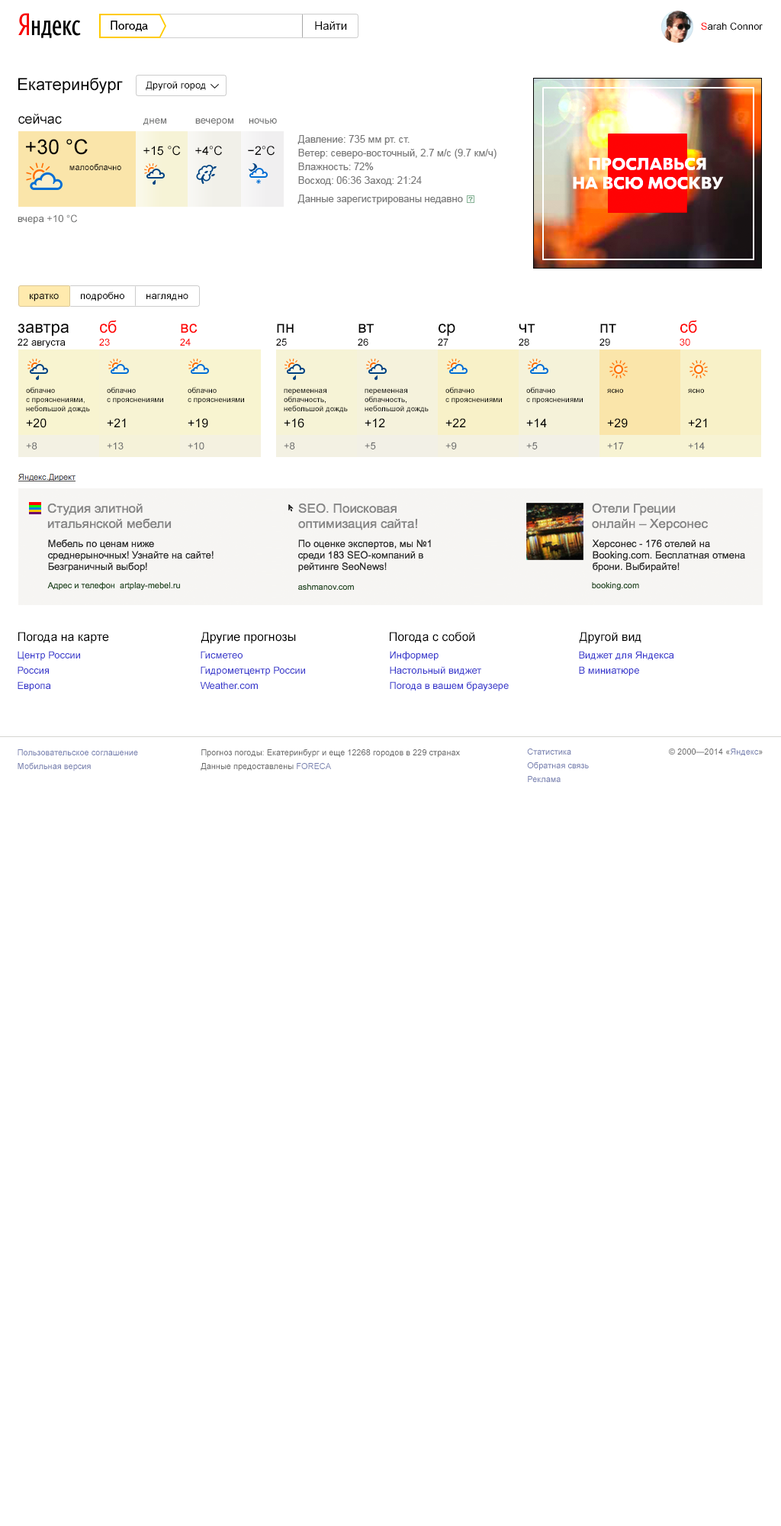
<style>
.page{position:relative;width:781px;height:1526px;background:#ffffff}
.page>*{position:absolute;margin:0}
.t1{font:12.2px "TextbookNew-Regular";color:#000000}
.t2{font:11.4px "ArialMT";color:#000000}
.t3{font:9.9px "ArialMT";color:#000000}
.t4{font:9.9px "ArialMT";color:#ff0000}
.t5{font:16.8px "ArialMT";color:#000000}
.t6{font:13.7px "ArialMT";color:#000000}
.t7{font:9.9px "ArialMT";color:#6d6e6e}
.t8{font:9.9px/13.7px "ArialMT";color:#797979}
.t9{font:9.9px/18.3px "ArialMT";color:#797979}
.t10{font:20.6px "ArialMT";color:#000000}
.t11{font:12.2px "ArialMT";color:#000000}
.t12{font:8.4px "ArialMT";color:#000000}
.t13{font:16.8px "ArialMT";color:#ff0000}
.t14{font:7.6px/9.2px "ArialMT";color:#000000}
.t15{font:7.6px "ArialMT";color:#000000}
.t16{font:9.9px/15.3px "ArialMT";color:#3333cc}
.t17{font:8.4px/13.7px "ArialMT";color:#747eaf}
.t18{font:8.4px/13.7px "ArialMT";color:#666666}
.t19{font:8.4px "ArialMT";color:#666666}
.t20{font:8.4px "ArialMT";color:#747eaf}
</style>
<div class="page">
<p class="t1" style="left:111px;top:21px;width:37px;height:10px">Погода</p>
<p class="t2" style="left:315px;top:21px;width:32px;height:9px">Найти</p>
<p class="t3" style="left:701px;top:22px;width:62px;height:9px"><span class="t4">S</span>arah Connor</p>
<p class="t5" style="left:18px;top:78px;width:105px;height:16px">Екатеринбург</p>
<p class="t3" style="left:146px;top:81px;width:60px;height:10px">Другой город</p>
<p class="t6" style="left:18px;top:114px;width:44px;height:10px">сейчас</p>
<p class="t7" style="left:143px;top:118px;width:23px;height:7px">днем</p>
<p class="t7" style="left:195px;top:118px;width:38px;height:8px">вечером</p>
<p class="t7" style="left:249px;top:118px;width:28px;height:6px">ночью</p>
<p class="t8" style="left:298px;top:135px;width:199px;height:69px">Давление: 735 мм рт. ст.<br>Ветер: северо-восточный, 2.7 м/с (9.7 км/ч)<br>Влажность: 72%<br>Восход: 06:36 Заход: 21:24<br><span class="t9">Данные зарегистрированы недавно</span></p>
<p class="t10" style="left:26px;top:139px;width:62px;height:16px">+30 °C</p>
<p class="t11" style="left:143px;top:146px;width:38px;height:10px">+15 °C</p>
<p class="t11" style="left:195px;top:146px;width:27px;height:10px">+4°C</p>
<p class="t11" style="left:248px;top:146px;width:27px;height:10px">−2°C</p>
<p class="t12" style="left:69px;top:163px;width:52px;height:7px">малооблачно</p>
<p class="t7" style="left:18px;top:214px;width:59px;height:10px">вчера +10 °C</p>
<p class="t3" style="left:30px;top:294px;width:29px;height:7px">кратко</p>
<p class="t3" style="left:81px;top:291px;width:43px;height:10px">подробно</p>
<p class="t3" style="left:147px;top:294px;width:41px;height:7px">наглядно</p>
<p class="t5" style="left:18px;top:324px;width:51px;height:13px">завтра</p>
<p class="t13" style="left:100px;top:320px;width:17px;height:13px">сб</p>
<p class="t13" style="left:181px;top:324px;width:17px;height:9px">вс</p>
<p class="t5" style="left:277px;top:324px;width:17px;height:9px">пн</p>
<p class="t5" style="left:359px;top:324px;width:15px;height:9px">вт</p>
<p class="t5" style="left:439px;top:324px;width:17px;height:13px">ср</p>
<p class="t5" style="left:519px;top:324px;width:17px;height:9px">чт</p>
<p class="t5" style="left:601px;top:324px;width:16px;height:9px">пт</p>
<p class="t13" style="left:681px;top:320px;width:16px;height:13px">сб</p>
<p class="t3" style="left:18px;top:338px;width:48px;height:10px">22 августа</p>
<p class="t4" style="left:99px;top:338px;width:11px;height:8px">23</p>
<p class="t4" style="left:180px;top:338px;width:11px;height:8px">24</p>
<p class="t3" style="left:276px;top:338px;width:11px;height:8px">25</p>
<p class="t3" style="left:358px;top:338px;width:11px;height:8px">26</p>
<p class="t3" style="left:438px;top:338px;width:11px;height:8px">27</p>
<p class="t3" style="left:519px;top:338px;width:11px;height:8px">28</p>
<p class="t3" style="left:600px;top:338px;width:10px;height:8px">29</p>
<p class="t4" style="left:680px;top:338px;width:11px;height:8px">30</p>
<p class="t14" style="left:26px;top:387px;width:64px;height:26px">облачно<br>с прояснениями, небольшой дождь</p>
<p class="t14" style="left:107px;top:387px;width:56px;height:17px">облачно <br>с прояснениями</p>
<p class="t14" style="left:188px;top:387px;width:56px;height:17px">облачно <br>с прояснениями</p>
<p class="t14" style="left:284px;top:388px;width:64px;height:25px">переменная облачность, небольшой дождь</p>
<p class="t14" style="left:365px;top:388px;width:64px;height:25px">переменная облачность, небольшой дождь</p>
<p class="t14" style="left:446px;top:387px;width:56px;height:17px">облачно <br>с прояснениями</p>
<p class="t14" style="left:527px;top:387px;width:56px;height:17px">облачно <br>с прояснениями</p>
<p class="t15" style="left:607px;top:388px;width:16px;height:5px">ясно</p>
<p class="t15" style="left:688px;top:388px;width:16px;height:5px">ясно</p>
<p class="t11" style="left:26px;top:418px;width:21px;height:10px">+20</p>
<p class="t11" style="left:107px;top:418px;width:19px;height:9px">+21</p>
<p class="t11" style="left:188px;top:418px;width:20px;height:10px">+19</p>
<p class="t11" style="left:284px;top:418px;width:20px;height:10px">+16</p>
<p class="t11" style="left:365px;top:418px;width:20px;height:9px">+12</p>
<p class="t11" style="left:446px;top:418px;width:20px;height:9px">+22</p>
<p class="t11" style="left:527px;top:418px;width:20px;height:9px">+14</p>
<p class="t11" style="left:607px;top:418px;width:21px;height:10px">+29</p>
<p class="t11" style="left:688px;top:418px;width:19px;height:9px">+21</p>
<p class="t7" style="left:26px;top:442px;width:11px;height:7px">+8</p>
<p class="t7" style="left:107px;top:442px;width:17px;height:7px">+13</p>
<p class="t7" style="left:188px;top:442px;width:16px;height:7px">+10</p>
<p class="t7" style="left:284px;top:442px;width:11px;height:7px">+8</p>
<p class="t7" style="left:365px;top:442px;width:11px;height:7px">+5</p>
<p class="t7" style="left:446px;top:442px;width:11px;height:7px">+9</p>
<p class="t7" style="left:527px;top:442px;width:11px;height:7px">+5</p>
<p class="t7" style="left:607px;top:442px;width:17px;height:7px">+17</p>
<p class="t7" style="left:688px;top:442px;width:17px;height:7px">+14</p>
<p class="t11" style="left:18px;top:632px;width:91px;height:12px">Погода на карте</p>
<p class="t11" style="left:201px;top:632px;width:95px;height:12px">Другие прогнозы</p>
<p class="t11" style="left:390px;top:632px;width:85px;height:11px">Погода с собой</p>
<p class="t11" style="left:579px;top:632px;width:63px;height:12px">Другой вид</p>
<p class="t16" style="left:18px;top:651px;width:62px;height:40px">Центр России<br>Россия<br>Европа</p>
<p class="t16" style="left:200px;top:651px;width:105px;height:38px">Гисметео<br>Гидрометцентр России<br>Weather.com</p>
<p class="t16" style="left:390px;top:651px;width:119px;height:40px">Информер<br>Настольный виджет<br>Погода в вашем браузере</p>
<p class="t16" style="left:579px;top:651px;width:96px;height:25px">Виджет для Яндекса<br>В миниатюре</p>
<p class="t17" style="left:18px;top:749px;width:120px;height:22px">Пользовательское соглашение<br>Мобильная версия</p>
<p class="t18" style="left:201px;top:749px;width:259px;height:22px">Прогноз погоды: Екатеринбург и еще 12268 городов в 229 странах<br>Данные предоставлены <span class="t17">FORECA</span></p>
<p class="t17" style="left:527px;top:749px;width:62px;height:33px">Статистика <br>Обратная связь <br>Реклама</p>
<p class="t19" style="left:669px;top:749px;width:94px;height:7px">© 2000—2014 «<span class="t20">Яндекс</span>»</p>
</div>
